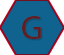
<style>
.page{position:relative;width:64px;height:55px;background:#0f638e}
.page>*{position:absolute;margin:0}
.t1{font:33.3px "MyriadPro-Regular";color:#5f1f22}
</style>
<div class="page">
<p class="t1" style="left:22px;top:16px;width:19px;height:23px">G</p>
</div>
